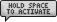
<style>
.page{position:relative;width:57px;height:22px;background:#ffffff}
.page>*{position:absolute;margin:0}
.t1{font:8px/6.2px "Really-Tiny-Font";letter-spacing:-0.04em;color:#464646;scale:1.09 1}
</style>
<div class="page">
<p class="t1" style="left:6px;top:2px;width:45px;height:13px;text-align:center">HOLD SPACE<br>TO ACTIVATE</p>
</div>
